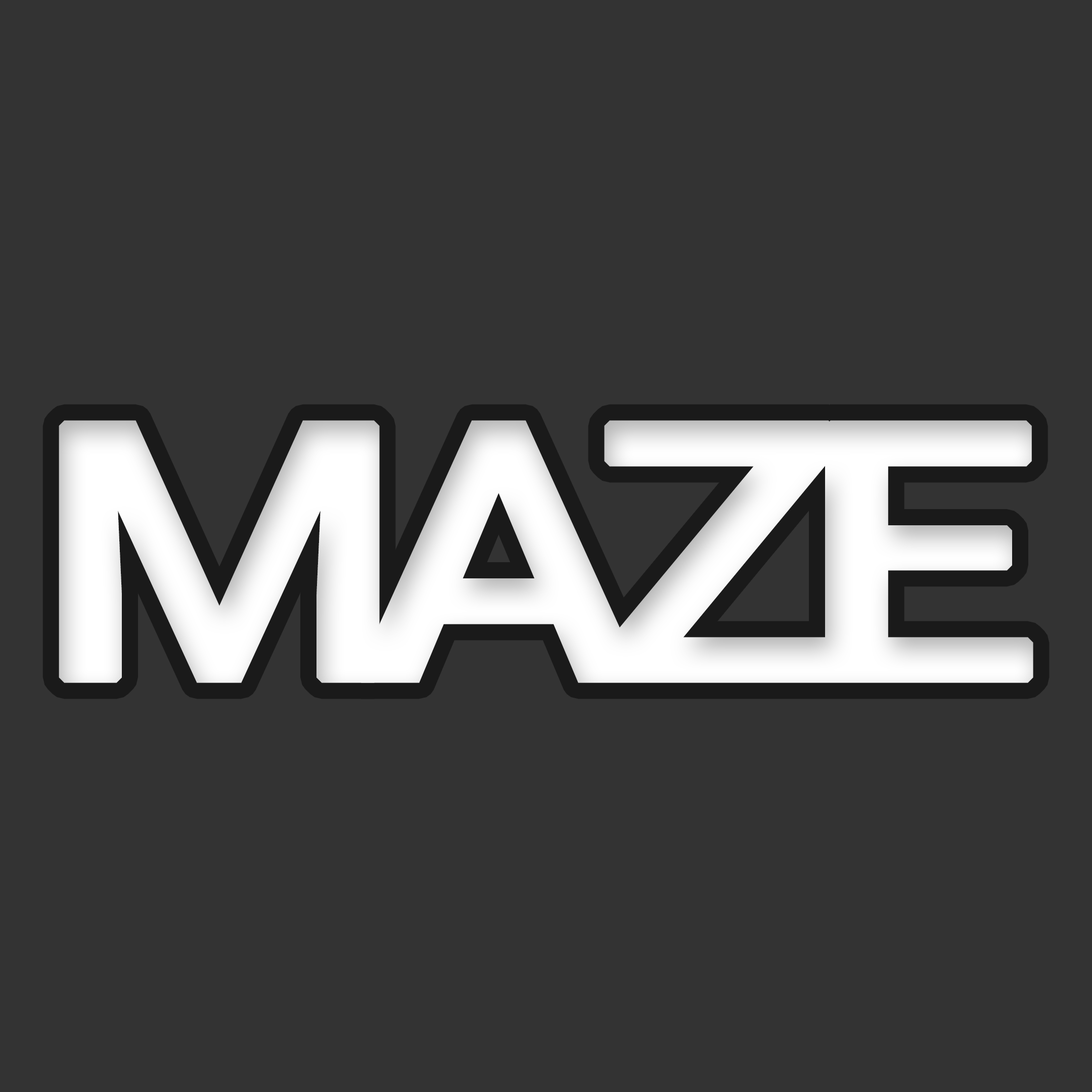
<style>
.page{position:relative;width:1092px;height:1092px;background:#333333}
.page>*{position:absolute;margin:0}
.t1{font:353.9px "Roboto-Medium";letter-spacing:-0.14em;color:#ffffff;font-weight:bold;scale:1.2 1}
</style>
<div class="page">
<p class="t1" style="left:59px;top:420px;width:974px;height:263px">MAZE</p>
</div>
